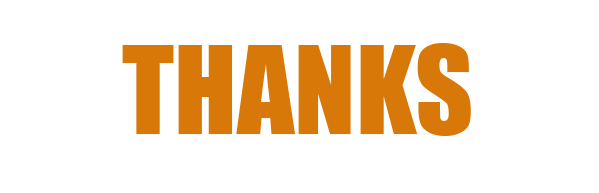
<style>
.page{position:relative;width:599px;height:193px;background:#ffffff}
.page>*{position:absolute;margin:0}
.t1{font:113.4px "Impact";color:#d77809}
</style>
<div class="page">
<p class="t1" style="left:122px;top:43px;width:349px;height:93px">THANKS</p>
</div>
